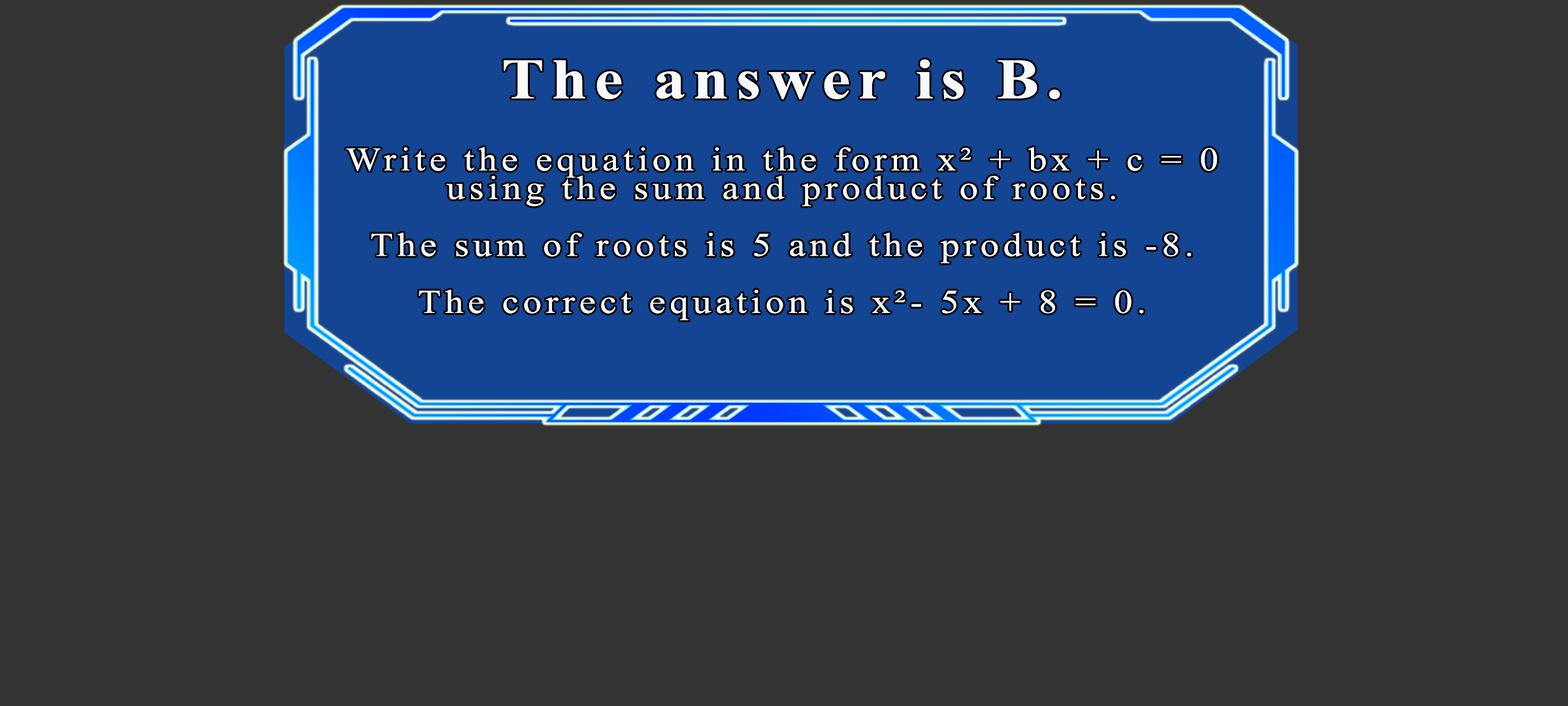
<style>
.page{position:relative;width:1568px;height:706px;background:#333333}
.page>*{position:absolute;margin:0}
.t1{font:57.2px "TimesNewRomanPS-BoldMT";letter-spacing:0.115em;color:#f7f9fb;scale:1.12 1}
.t2{font:33.2px/28.5px "TimesNewRomanPSMT";letter-spacing:0.115em;color:#f7f9fb;scale:1.12 1}
</style>
<div class="page">
<p class="t1" style="left:504px;top:59px;width:556px;height:40px">The answer is B.</p>
<p class="t2" style="left:346px;top:147px;width:871px;height:173px;text-align:center">Write the equation in the form x² + bx + c = 0<br>using the sum and product of roots.<br><br>The sum of roots is 5 and the product is -8.<br><br>The correct equation is x²- 5x + 8 = 0.</p>
</div>
